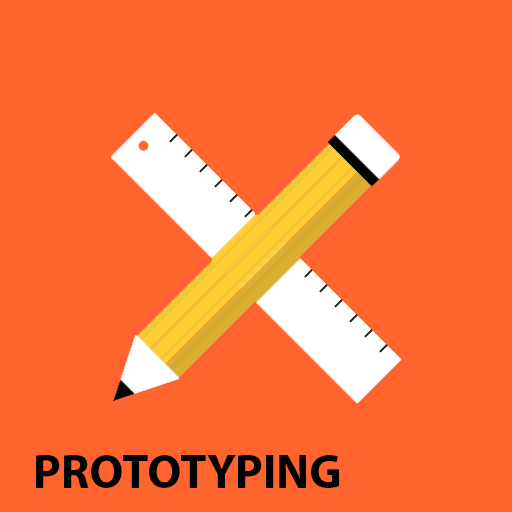
<style>
.page{position:relative;width:512px;height:512px;background:#ff642f}
.page>*{position:absolute;margin:0}
.t1{font:48px "MyriadPro-Bold";color:#000000}
</style>
<div class="page">
<p class="t1" style="left:36px;top:455px;width:303px;height:33px">PROTOTYPING</p>
</div>
